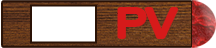
<style>
.page{position:relative;width:216px;height:48px;background:#ffffff}
.page>*{position:absolute;margin:0}
.t1{font:39.3px "ArialMT";color:#d61a1a;scale:1.16 1}
</style>
<div class="page">
<p class="t1" style="left:119px;top:9px;width:58px;height:28px">PV</p>
</div>
